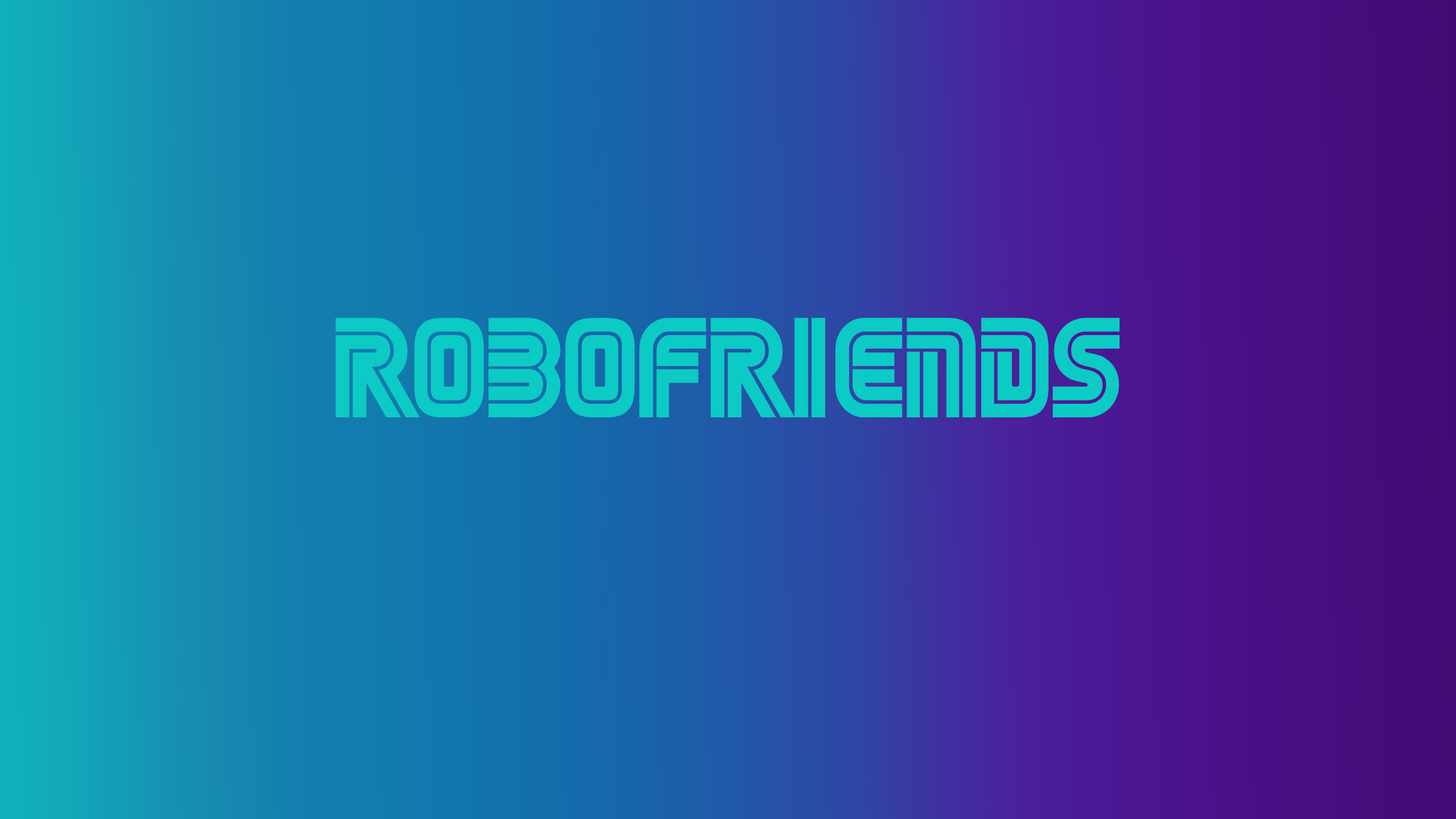
<style>
.page{position:relative;width:1456px;height:819px}
.page>*{position:absolute;margin:0}
.t1{font:101.3px "SEGA";letter-spacing:0.005em;color:#0ccac4}
</style>
<div class="page">
<p class="t1" style="left:335px;top:318px;width:785px;height:99px">ROBOFRIENDS</p>
</div>
